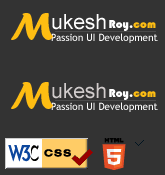
<style>
.page{position:relative;width:165px;height:175px;background:#333333}
.page>*{position:absolute;margin:0}
.t1{font:40px "ForteMT";color:#febd12}
.t2{font:21px "ArialMT";color:#ffffff}
.t3{font:12px "Bauhaus93";color:#ffffff}
.t4{font:12px "Bauhaus93";color:#febd12}
.t5{font:10px "TrebuchetMS";color:#ffffff}
.t6{font:21px "ArialMT";color:#d1cccc}
</style>
<div class="page">
<p class="t1" style="left:11px;top:13px;width:42px;height:27px">M</p>
<p class="t2" style="left:52px;top:14px;width:54px;height:16px">ukesh</p>
<p class="t3" style="left:109px;top:20px;width:47px;height:11px">Roy.<span class="t4">com</span></p>
<p class="t5" style="left:51px;top:33px;width:107px;height:10px">Passion UI Development</p>
<p class="t1" style="left:11px;top:82px;width:42px;height:27px">M</p>
<p class="t6" style="left:52px;top:83px;width:54px;height:16px">ukesh</p>
<p class="t3" style="left:109px;top:89px;width:47px;height:11px">Roy.<span class="t4">com</span></p>
<p class="t5" style="left:51px;top:102px;width:107px;height:10px">Passion UI Development</p>
</div>
